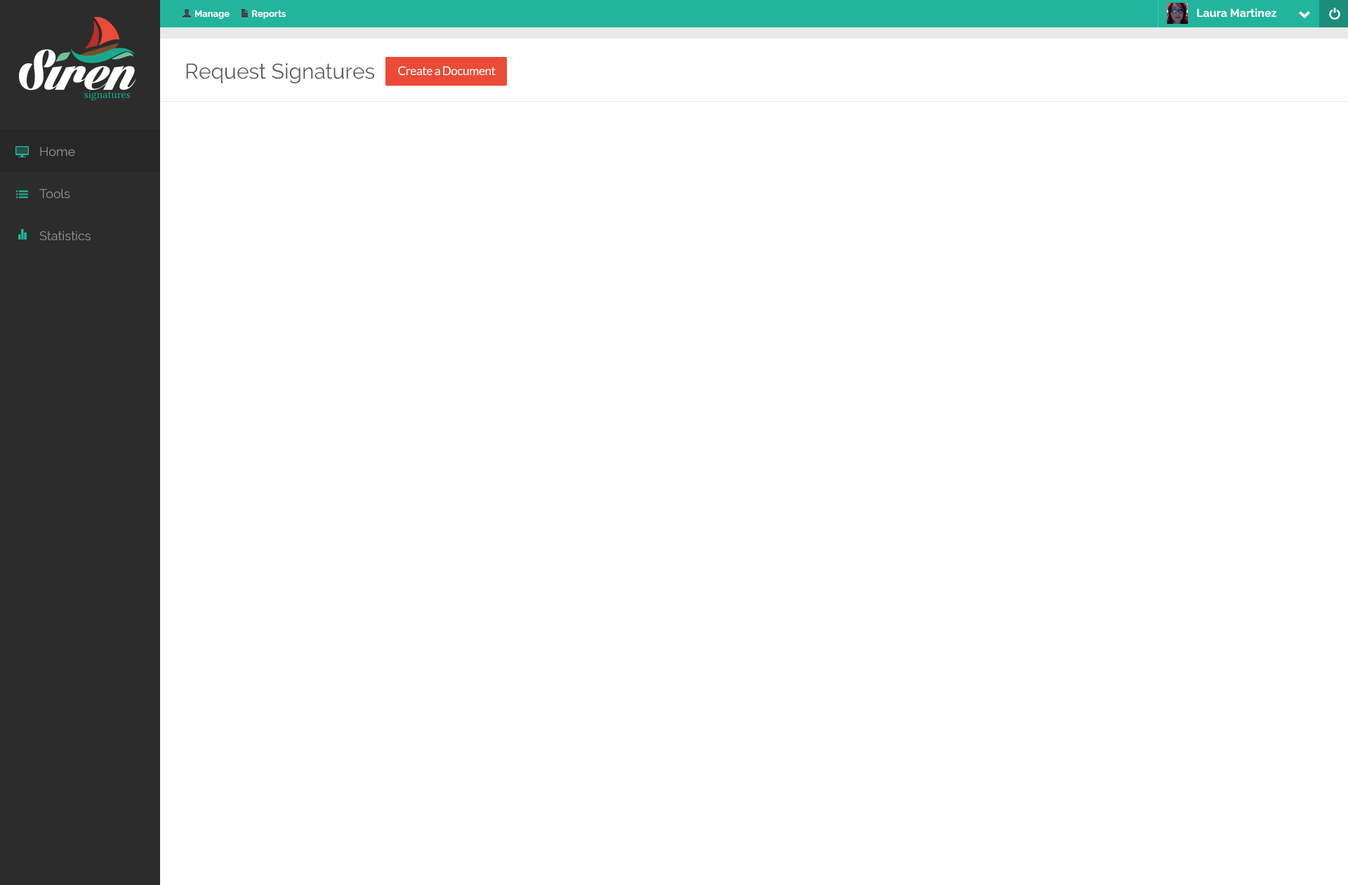
<style>
.page{position:relative;width:1348px;height:885px;background:#ffffff}
.page>*{position:absolute;margin:0}
.t1{font:9.1px "Raleway-Bold";color:#ffffff}
.t2{font:11.2px "Raleway-Bold";color:#ffffff}
.t3{font:21.1px "Raleway";color:#5a5a5a}
.t4{font:12px "Lato-Regular";letter-spacing:-0.025em;color:#ffffff}
.t5{font:12.6px/42.1px "Raleway";color:#919191}
</style>
<div class="page">
<p class="t1" style="left:195px;top:10px;width:91px;height:9px">Manage          Reports</p>
<p class="t2" style="left:1197px;top:8px;width:79px;height:10px">Laura Martinez</p>
<p class="t3" style="left:186px;top:63px;width:188px;height:21px">Request Signatures</p>
<p class="t4" style="left:398px;top:66px;width:98px;height:9px">Create a Document</p>
<p class="t5" style="left:39px;top:147px;width:52px;height:94px;text-align:justify">Home<br>Tools<br>Statistics</p>
</div>
